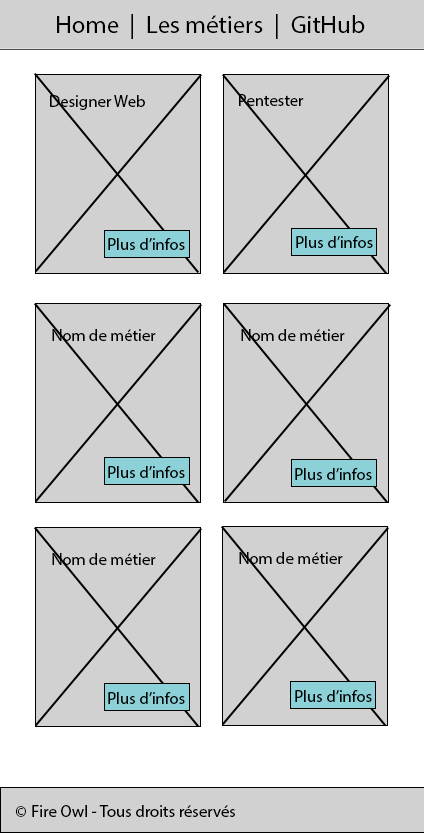
<style>
.page{position:relative;width:424px;height:833px;background:#d2d1d1}
.page>*{position:absolute;margin:0}
.t1{font:25px "MyriadPro-Regular";color:#000000}
.t2{font:16.7px "MyriadPro-Regular";color:#000000}
</style>
<div class="page">
<p class="t1" style="left:57px;top:14px;width:308px;height:25px">Home  |  Les métiers  |  GitHub</p>
<p class="t2" style="left:50px;top:95px;width:95px;height:15px">Designer Web</p>
<p class="t2" style="left:239px;top:94px;width:65px;height:12px">Pentester</p>
<p class="t2" style="left:108px;top:238px;width:77px;height:12px">Plus d’infos</p>
<p class="t2" style="left:296px;top:236px;width:77px;height:12px">Plus d’infos</p>
<p class="t2" style="left:52px;top:329px;width:104px;height:12px">Nom de métier</p>
<p class="t2" style="left:241px;top:329px;width:104px;height:12px">Nom de métier</p>
<p class="t2" style="left:108px;top:466px;width:77px;height:12px">Plus d’infos</p>
<p class="t2" style="left:295px;top:468px;width:77px;height:12px">Plus d’infos</p>
<p class="t2" style="left:52px;top:553px;width:104px;height:12px">Nom de métier</p>
<p class="t2" style="left:239px;top:552px;width:104px;height:12px">Nom de métier</p>
<p class="t2" style="left:108px;top:692px;width:77px;height:12px">Plus d’infos</p>
<p class="t2" style="left:295px;top:690px;width:77px;height:12px">Plus d’infos</p>
<p class="t2" style="left:15px;top:805px;width:220px;height:12px">© Fire Owl - Tous droits réservés</p>
</div>
